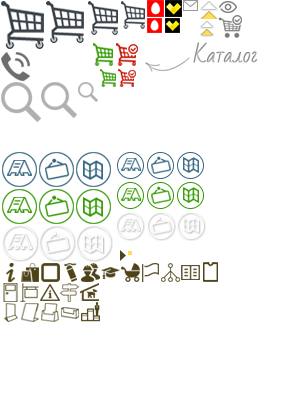
<style>
.page{position:relative;width:300px;height:400px;background:#ffffff}
.page>*{position:absolute;margin:0}
.t1{font:20px "BadScript-Regular";color:#969696;font-weight:bold}
</style>
<div class="page">
<p class="t1" style="left:193px;top:42px;width:65px;height:21px">Каталог</p>
</div>
